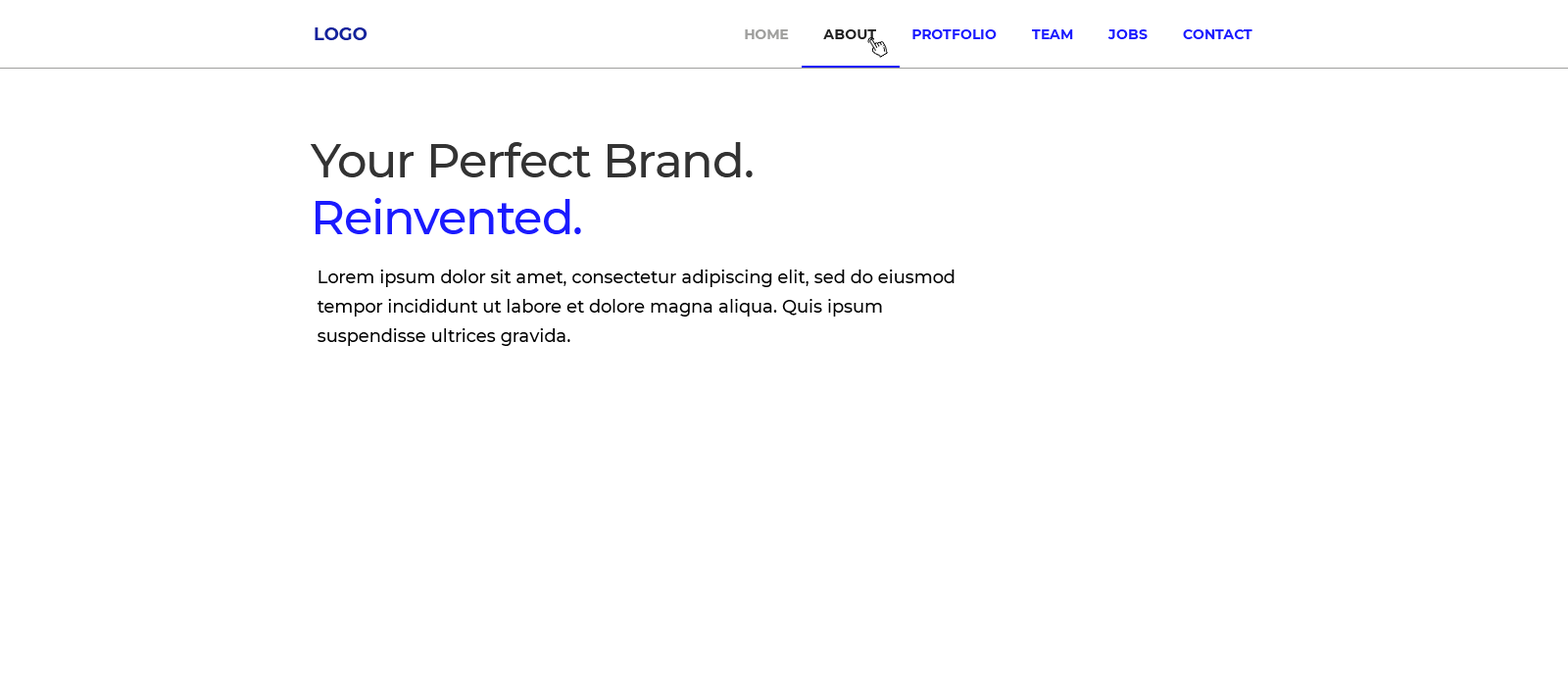
<style>
.page{position:relative;width:1568px;height:686px;background:#ffffff}
.page>*{position:absolute;margin:0}
.t1{font:17.6px "Montserrat-Bold";color:#11229d;text-transform:uppercase}
.t2{font:13.7px "Montserrat-Bold";color:#1b1bff;text-transform:uppercase}
.t3{font:13.7px "Montserrat-Bold";color:#a0a09e;text-transform:uppercase}
.t4{font:13.7px "Montserrat-Bold";color:#222222;text-transform:uppercase}
.t5{font:47px "Montserrat-Medium";letter-spacing:-0.025em;color:#333333}
.t6{font:47px "Montserrat-Medium";letter-spacing:-0.025em;color:#1b1bff}
.t7{font:17.6px/29.4px "Montserrat-Medium";color:#000000}
</style>
<div class="page">
<p class="t1" style="left:315px;top:27px;width:53px;height:13px">logo</p>
<p class="t2" style="left:745px;top:29px;width:507px;height:10px"><span class="t3">Home         </span><span class="t4">about        </span> protfolio         team         jobs         contact</p>
<p class="t5" style="left:311px;top:142px;width:442px;height:92px">Your Perfect Brand.<br><span class="t6">Reinvented.</span></p>
<p class="t7" style="left:318px;top:270px;width:637px;height:76px">Lorem ipsum dolor sit amet, consectetur adipiscing elit, sed do eiusmod tempor incididunt ut labore et dolore magna aliqua. Quis ipsum suspendisse ultrices gravida.</p>
</div>
